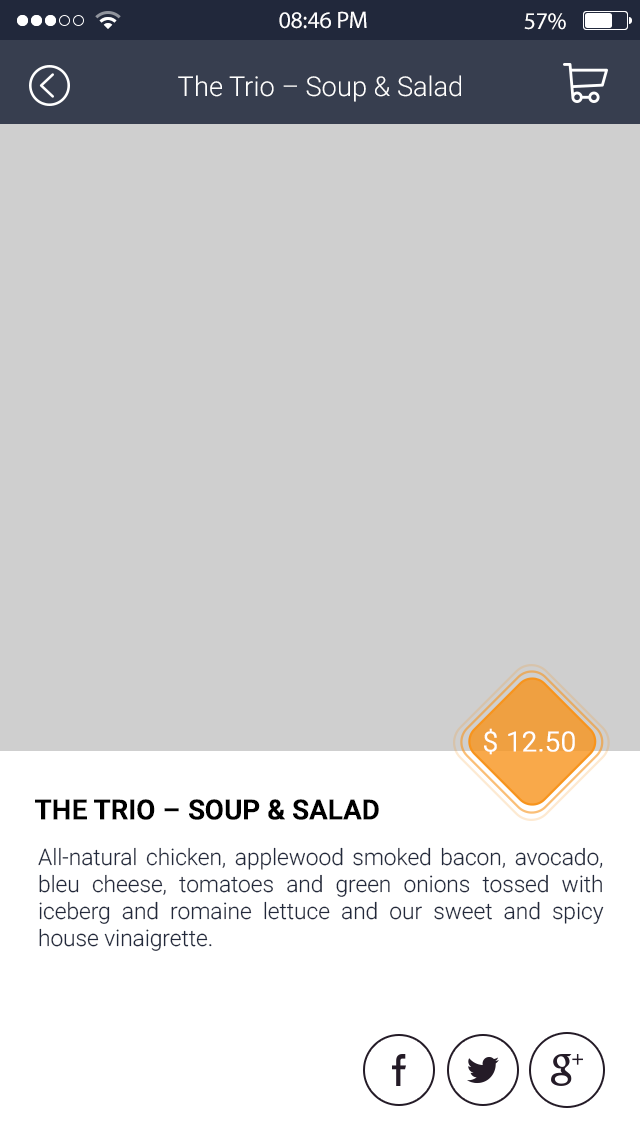
<style>
.page{position:relative;width:640px;height:1136px;background:#cfcfcf}
.page>*{position:absolute;margin:0}
.t1{font:24px "MyriadPro-Regular";color:#fefeff}
.t2{font:24px "MyriadPro-Regular";color:#ffffff}
.t3{font:27.2px "Roboto-Light";color:#ffffff}
.t4{font:27.2px "Roboto-Light";color:#ffffff;font-weight:bold}
.t5{font:27.2px "Roboto-Medium";letter-spacing:-0.01em;color:#000000;text-transform:uppercase;font-weight:bold}
.t6{font:22.6px "Roboto-Light";color:#21283b}
</style>
<div class="page">
<p class="t1" style="left:279px;top:11px;width:88px;height:18px">08:46 PM</p>
<p class="t2" style="left:524px;top:13px;width:42px;height:17px">57%</p>
<p class="t3" style="left:178px;top:75px;width:283px;height:27px">The Trio – Soup &amp; Salad</p>
<p class="t4" style="left:484px;top:728px;width:91px;height:27px">$ 12.50</p>
<p class="t5" style="left:35px;top:799px;width:344px;height:21px">The Trio – Soup &amp; Salad</p>
<p class="t6" style="left:38px;top:847px;width:566px;height:104px;text-align:justify">All-natural chicken, applewood smoked bacon, avocado, bleu cheese, tomatoes and green onions tossed with iceberg and romaine lettuce and our sweet and spicy house vinaigrette.</p>
</div>
